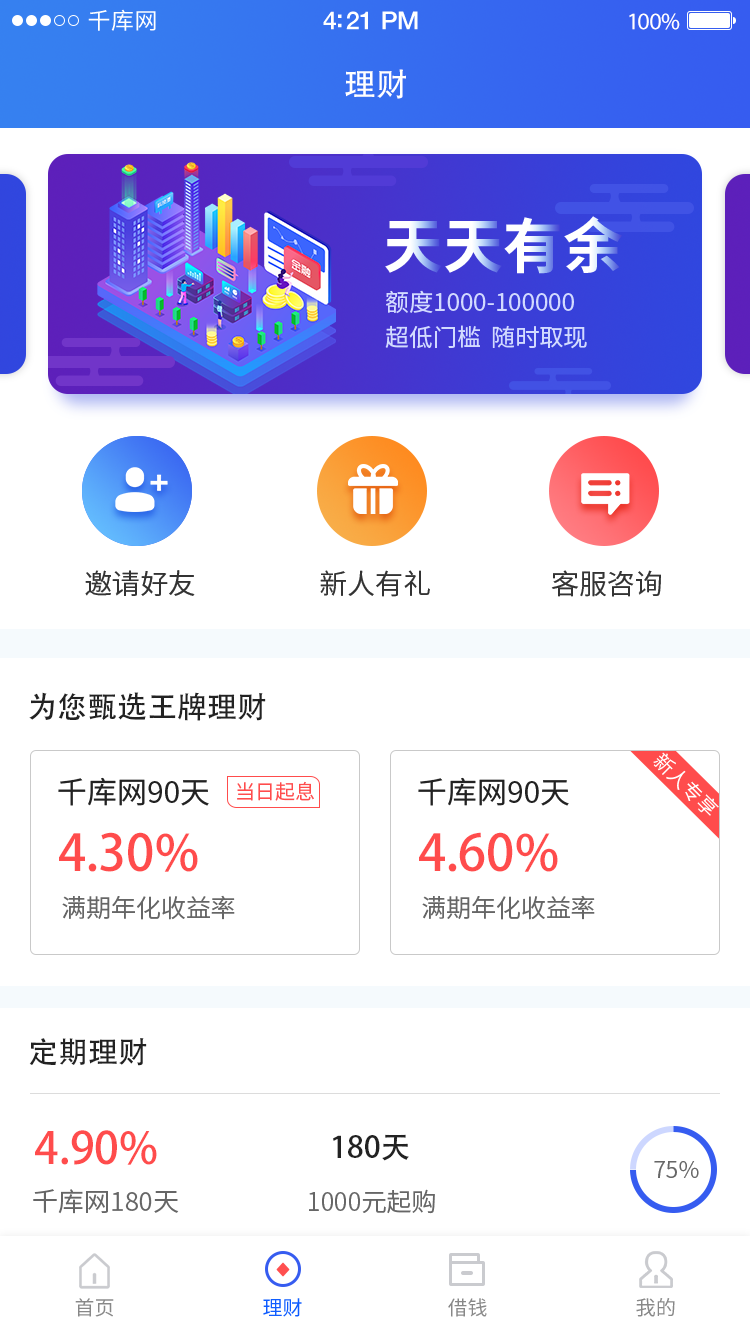
<style>
.page{position:relative;width:750px;height:1334px;background:#ffffff}
.page>*{position:absolute;margin:0}
.t1{font:23px "SourceHanSansCN-Regular";letter-spacing:0.02em;color:#ffffff}
.t2{font:25px "HelveticaNeue-Medium";letter-spacing:-0.02em;color:#ffffff}
.t3{font:24px "MyriadPro-Regular";letter-spacing:-0.02em;color:#ffffff}
.t4{font:32px "AdobeHeitiStd-Regular";color:#ffffff}
.t5{font:60px "SourceHanSansCN-Bold"}
.t6{font:24px "SourceHanSansCN-Regular";color:#d2daff}
.t7{font:28px "SourceHanSansCN-Regular";color:#333333}
.t8{font:30px "AdobeHeitiStd-Regular";color:#222222}
.t9{font:30px "SourceHanSansCN-Regular";color:#222222}
.t10{font:20px "SourceHanSansCN-Normal";color:#ff4c4c}
.t11{font:50px "AdobeHeitiStd-Regular";color:#ff4c4c}
.t12{font:25px "SourceHanSansCN-Normal";color:#666666}
.t13{font:44px "AdobeHeitiStd-Regular";color:#ff4c4c}
.t14{font:23px "SourceHanSansCN-Normal";color:#666666}
.t15{font:26px "SourceHanSansCN-Normal";color:#666666}
.t16{font:20px "SourceHanSansCN-Regular";color:#888888}
.t17{font:20px "SourceHanSansCN-Regular";color:#0f5dff}
.t18{font:20.3px "SourceHanSansCN-Regular";color:#888888}
</style>
<div class="page">
<p class="t1" style="left:88px;top:9px;width:68px;height:22px">千库网</p>
<p class="t2" style="left:323px;top:11px;width:95px;height:19px">4:21 PM</p>
<p class="t3" style="left:629px;top:13px;width:51px;height:17px">100%</p>
<p class="t4" style="left:345px;top:69px;width:61px;height:30px">理财</p>
<p class="t5" style="left:385px;top:216px;width:238px;height:58px">天天有余</p>
<p class="t6" style="left:386px;top:290px;width:188px;height:24px">额度1000-100000</p>
<p class="t6" style="left:385px;top:325px;width:202px;height:24px">超低门槛  随时取现</p>
<p class="t7" style="left:85px;top:570px;width:110px;height:26px">邀请好友</p>
<p class="t7" style="left:320px;top:570px;width:110px;height:27px">新人有礼</p>
<p class="t7" style="left:551px;top:570px;width:110px;height:27px">客服咨询</p>
<p class="t8" style="left:29px;top:692px;width:237px;height:29px">为您甄选王牌理财</p>
<p class="t9" style="left:58px;top:777px;width:151px;height:29px">千库网90天</p>
<p class="t10" style="left:237px;top:781px;width:77px;height:20px">当日起息</p>
<p class="t9" style="left:418px;top:777px;width:151px;height:29px">千库网90天</p>
<p class="t11" style="left:59px;top:832px;width:139px;height:40px">4.30%</p>
<p class="t11" style="left:419px;top:832px;width:139px;height:40px">4.60%</p>
<p class="t12" style="left:62px;top:895px;width:173px;height:25px">满期年化收益率</p>
<p class="t12" style="left:422px;top:895px;width:173px;height:25px">满期年化收益率</p>
<p class="t8" style="left:29px;top:1038px;width:118px;height:28px">定期理财</p>
<p class="t13" style="left:35px;top:1130px;width:122px;height:35px">4.90%</p>
<p class="t8" style="left:333px;top:1134px;width:76px;height:27px">180天</p>
<p class="t14" style="left:654px;top:1161px;width:45px;height:17px">75%</p>
<p class="t15" style="left:33px;top:1189px;width:146px;height:25px">千库网180天</p>
<p class="t12" style="left:309px;top:1189px;width:126px;height:25px">1000元起购</p>
<p class="t16" style="left:75px;top:1298px;width:39px;height:19px">首页</p>
<p class="t17" style="left:263px;top:1298px;width:39px;height:19px">理财</p>
<p class="t16" style="left:448px;top:1298px;width:39px;height:19px">借钱</p>
<p class="t18" style="left:636px;top:1298px;width:39px;height:19px">我的</p>
</div>
